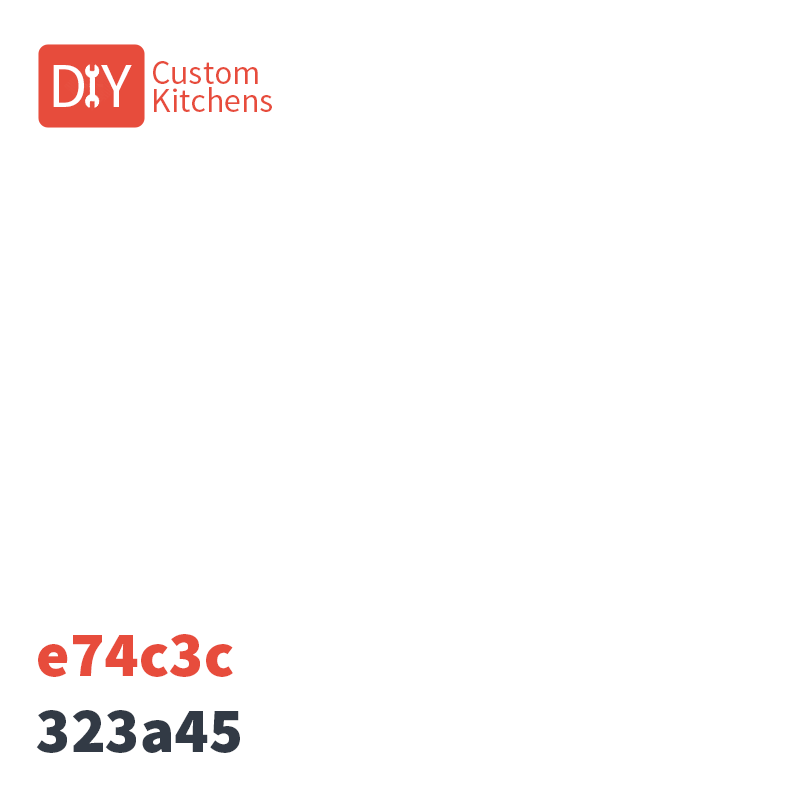
<style>
.page{position:relative;width:800px;height:800px;background:#ffffff}
.page>*{position:absolute;margin:0}
.t1{font:64px "SourceSansPro-Regular";color:#ffffff}
.t2{font:34px/28px "SourceSansPro-Regular";color:#e74c3c}
.t3{font:64px "SourceSansPro-Black";color:#e74c3c}
.t4{font:64px "SourceSansPro-Black";color:#323a45}
</style>
<div class="page">
<p class="t1" style="left:53px;top:65px;width:79px;height:42px">D Y</p>
<p class="t2" style="left:153px;top:61px;width:119px;height:51px">Custom<br>Kitchens</p>
<p class="t3" style="left:36px;top:634px;width:204px;height:119px">e74c3c<br><span class="t4">323a45</span></p>
</div>
